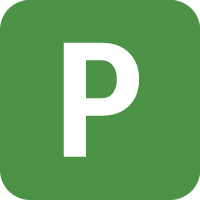
<style>
.page{position:relative;width:200px;height:200px;background:#4d9345}
.page>*{position:absolute;margin:0}
.t1{font:160px "Roboto-BoldCondensed";color:#ffffff}
</style>
<div class="page">
<p class="t1" style="left:63px;top:42px;width:76px;height:115px">P</p>
</div>
